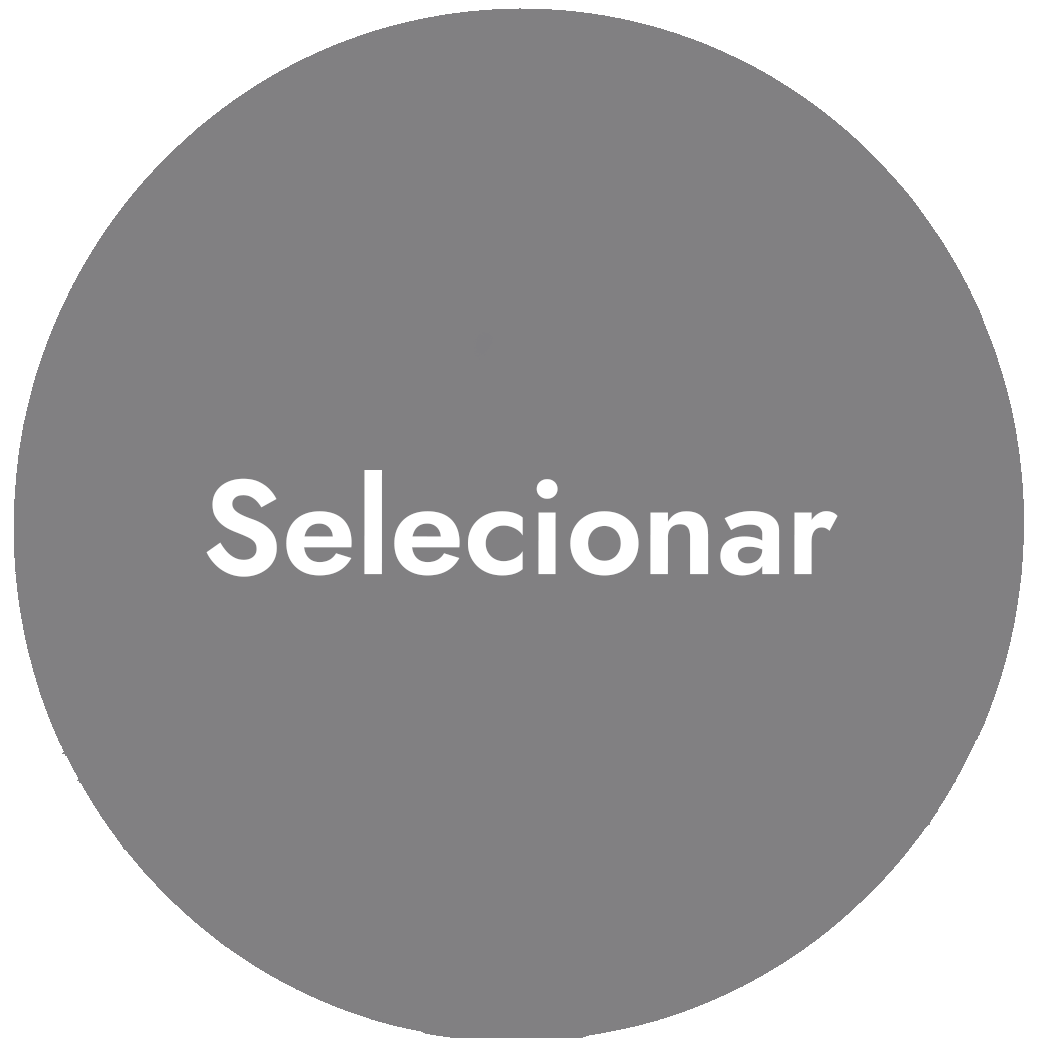
<style>
.page{position:relative;width:1038px;height:1038px;background:#818082}
.page>*{position:absolute;margin:0}
.t1{font:133.3px "Jost-SemiBold";color:#ffffff}
</style>
<div class="page">
<p class="t1" style="left:206px;top:470px;width:632px;height:107px">Selecionar</p>
</div>
